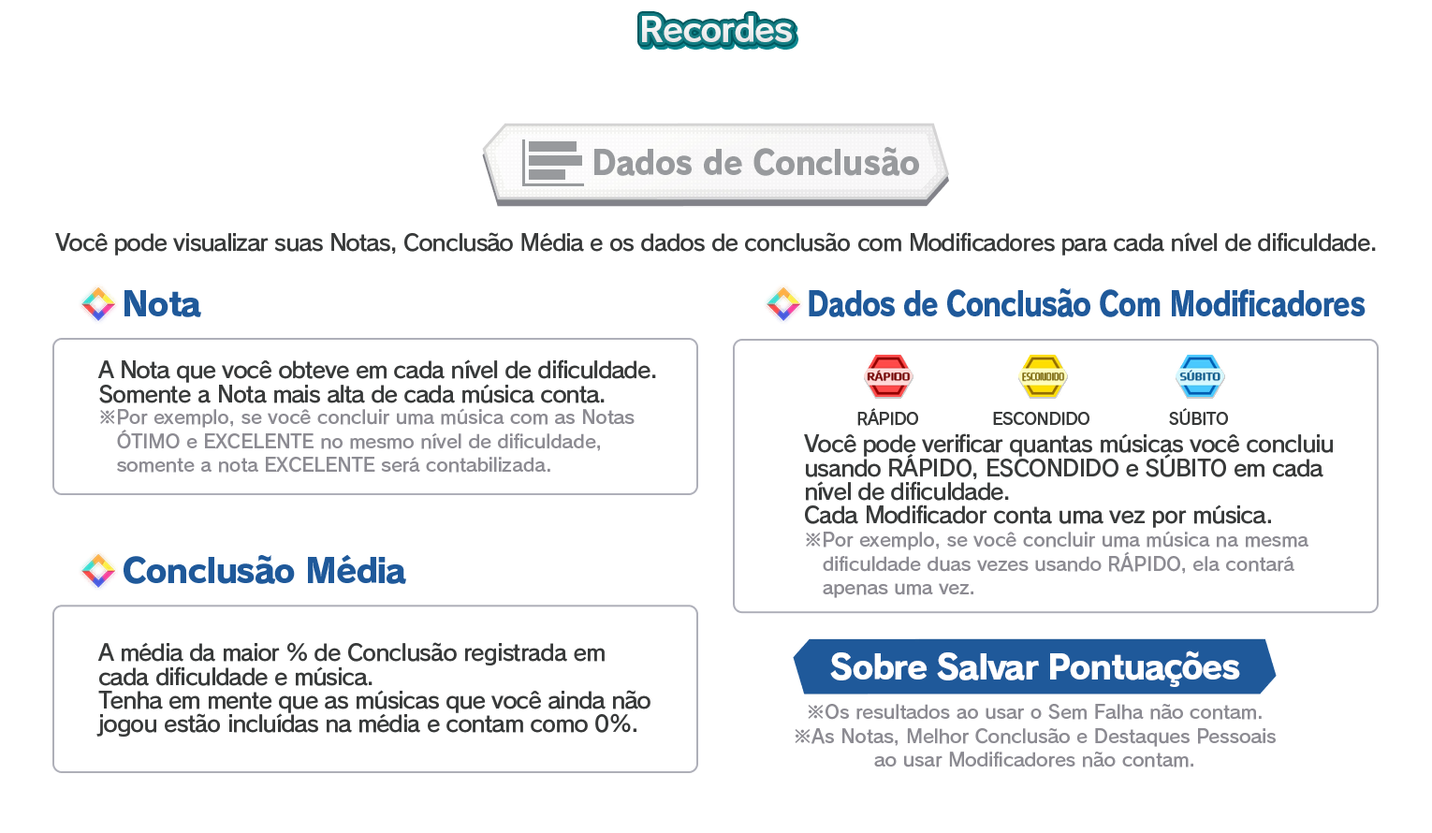
<style>
.page{position:relative;width:1432px;height:833px;background:#ffffff}
.page>*{position:absolute;margin:0}
.t1{font:33.7px "RodinPro-B";letter-spacing:-0.039em;color:#f0f0f1}
.t2{font:33.7px "RodinPro-EB";letter-spacing:-0.02em;color:#989a9d;scale:0.93 1}
.t3{font:22.5px "RodinPro-DB";letter-spacing:-0.04em;color:#383a3a}
.t4{font:33.7px "RodinPro-EB";letter-spacing:-0.04em;color:#1f599a}
.t5{font:33.7px "RodinPro-EB";letter-spacing:-0.04em;color:#1f599a;scale:0.83 1}
.t6{font:22.5px/23.7px "RodinPro-DB";letter-spacing:-0.04em;color:#383a3a}
.t7{font:18.7px/23.7px "RodinPro-DB";letter-spacing:-0.014em;color:#8c8b92}
.t8{font:16.2px "RodinPro-DB";letter-spacing:-0.032em;color:#383a3a}
.t9{font:33.7px "RodinPro-EB";letter-spacing:-0.048em;color:#ffffff}
</style>
<div class="page">
<p class="t1" style="left:642px;top:16px;width:150px;height:26px">Recordes</p>
<p class="t2" style="left:594px;top:147px;width:325px;height:29px">Dados de Conclusão</p>
<p class="t3" style="left:55px;top:232px;width:1321px;height:23px">Você pode visualizar suas Notas, Conclusão Média e os dados de conclusão com Modificadores para cada nível de dificuldade.</p>
<p class="t4" style="left:124px;top:290px;width:77px;height:27px">Nota</p>
<p class="t5" style="left:809px;top:288px;width:556px;height:29px">Dados de Conclusão Com Modificadores</p>
<p class="t6" style="left:98px;top:359px;width:558px;height:44px">A Nota que você obteve em cada nível de dificuldade.<br>Somente a Nota mais alta de cada música conta.</p>
<p class="t7" style="left:100px;top:408px;width:534px;height:65px">※Por exemplo, se você concluir uma música com as Notas<br>   ÓTIMO e EXCELENTE no mesmo nível de dificuldade,<br>   somente a nota EXCELENTE será contabilizada.</p>
<p class="t8" style="left:857px;top:408px;width:61px;height:18px">RÁPIDO</p>
<p class="t8" style="left:993px;top:412px;width:96px;height:14px">ESCONDIDO</p>
<p class="t8" style="left:1169px;top:408px;width:59px;height:18px">SÚBITO</p>
<p class="t6" style="left:804px;top:433px;width:529px;height:95px">Você pode verificar quantas músicas você concluiu<br>usando RÁPIDO, ESCONDIDO e SÚBITO em cada<br>nível de dificuldade.<br>Cada Modificador conta uma vez por música.</p>
<p class="t7" style="left:806px;top:531px;width:502px;height:67px">※Por exemplo, se você concluir uma música na mesma<br>   dificuldade duas vezes usando RÁPIDO, ela contará<br>   apenas uma vez.</p>
<p class="t4" style="left:124px;top:554px;width:282px;height:30px">Conclusão Média</p>
<p class="t6" style="left:96px;top:642px;width:554px;height:94px">A média da maior % de Conclusão registrada em<br>cada dificuldade e música.<br>Tenha em mente que as músicas que você ainda não<br>jogou estão incluídas na média e contam como 0%.</p>
<p class="t9" style="left:830px;top:650px;width:410px;height:37px">Sobre Salvar Pontuações</p>
<p class="t7" style="left:794px;top:704px;width:481px;height:63px;text-align:center">※Os resultados ao usar o Sem Falha não contam.<br>※As Notas, Melhor Conclusão e Destaques Pessoais<br>ao usar Modificadores não contam.</p>
</div>
